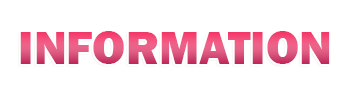
<style>
.page{position:relative;width:350px;height:100px;background:#ffffff}
.page>*{position:absolute;margin:0}
.t1{font:48px "FranklinGothic-Heavy";color:#e9527b;text-transform:uppercase}
</style>
<div class="page">
<p class="t1" style="left:20px;top:31px;width:310px;height:33px">Information</p>
</div>
